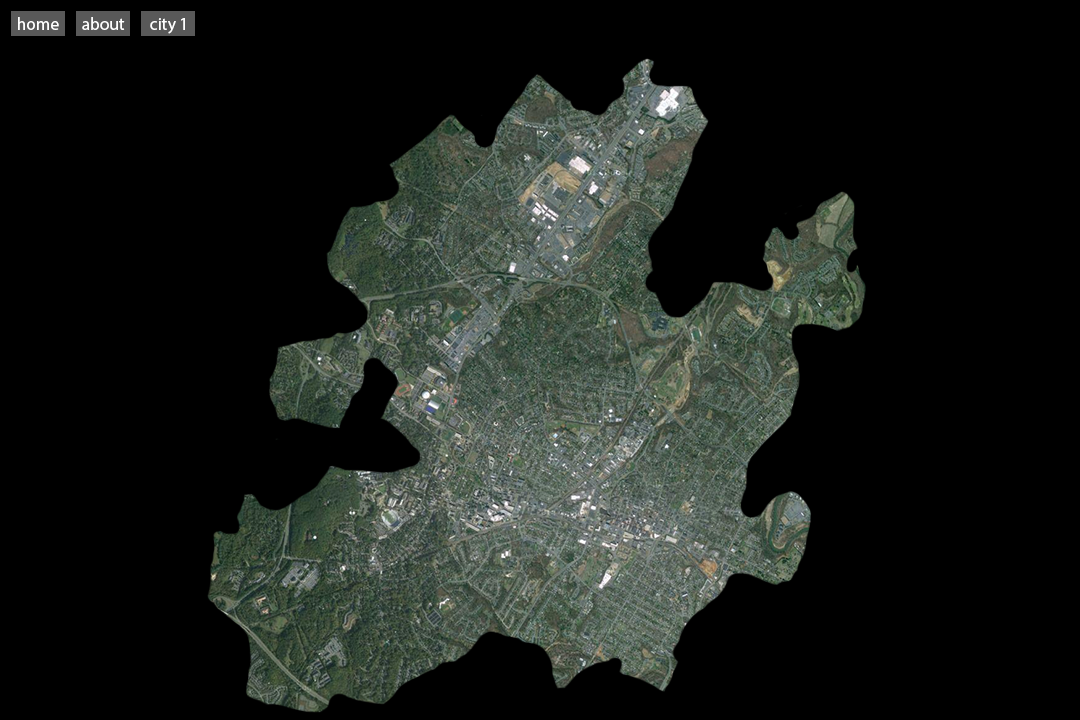
<style>
.page{position:relative;width:1080px;height:720px;background:#000000}
.page>*{position:absolute;margin:0}
.t1{font:17.4px "MyriadPro-Regular";color:#ffffff}
</style>
<div class="page">
<p class="t1" style="left:18px;top:17px;width:41px;height:13px">home</p>
<p class="t1" style="left:82px;top:17px;width:43px;height:13px">about</p>
<p class="t1" style="left:150px;top:18px;width:35px;height:16px">city 1</p>
</div>
